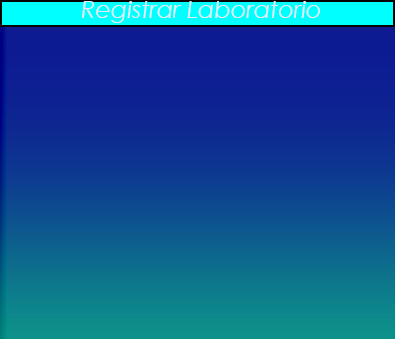
<style>
.page{position:relative;width:395px;height:339px}
.page>*{position:absolute;margin:0}
.t1{font:24px "CenturyGothic-Italic";color:#e8e9f4}
</style>
<div class="page">
<p class="t1" style="left:82px;top:1px;width:238px;height:22px">Registrar Laboratorio</p>
</div>
